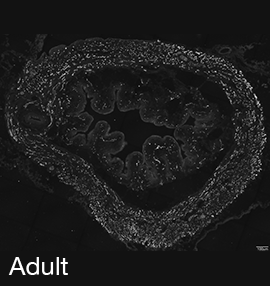
<style>
.page{position:relative;width:270px;height:286px;background:#121212}
.page>*{position:absolute;margin:0}
.t1{font:25.4px "HelveticaNeue";color:#ffffff}
</style>
<div class="page">
<p class="t1" style="left:8px;top:257px;width:60px;height:18px">Adult</p>
</div>
